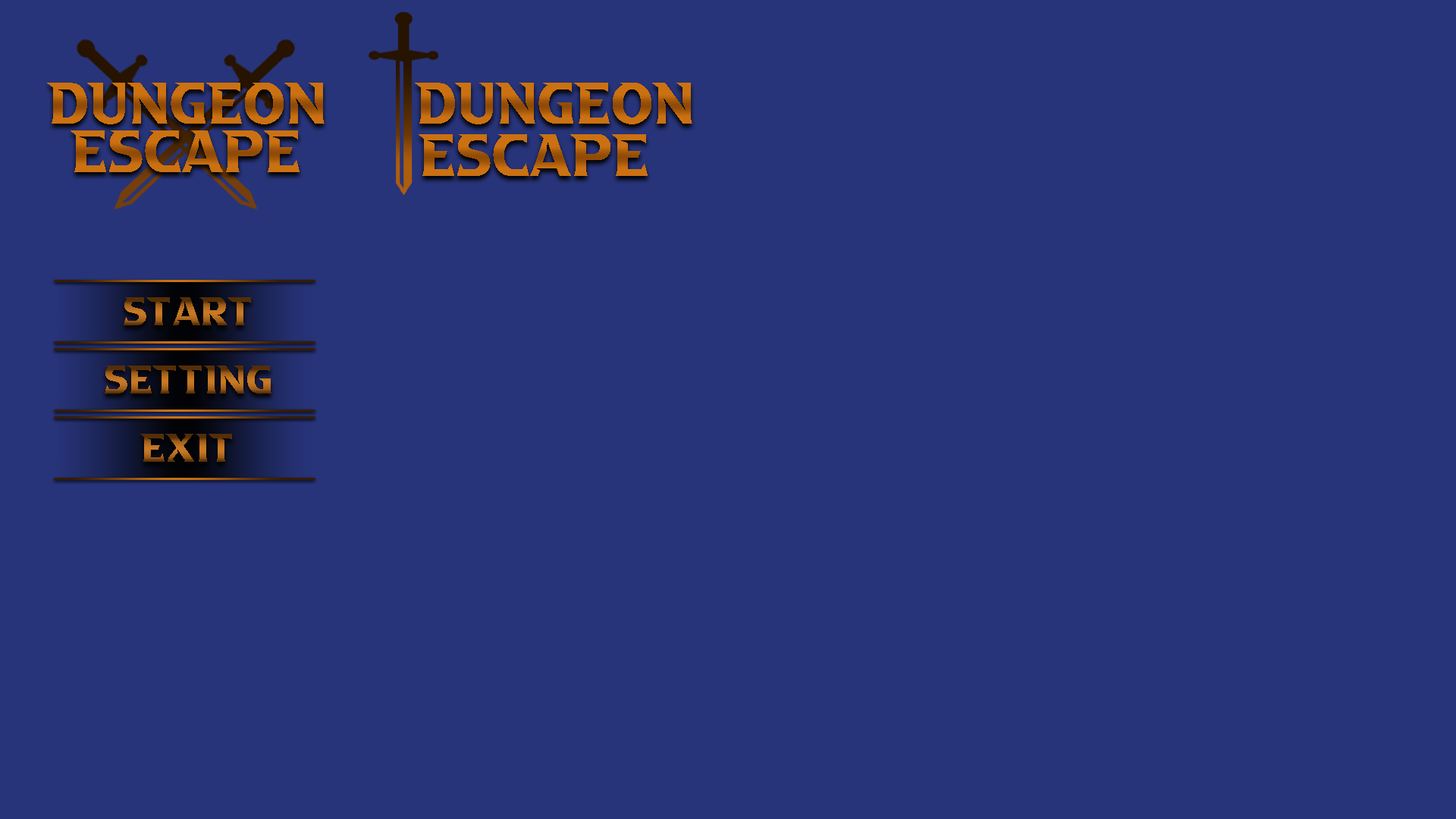
<style>
.page{position:relative;width:1456px;height:819px;background:#27347a}
.page>*{position:absolute;margin:0}
.t1{font:54.6px "aAbsoluteEmpire";letter-spacing:0.01em;color:#cc7110}
.t2{font:56.1px "aAbsoluteEmpire";letter-spacing:0.01em;color:#cb7111}
.t3{font:38px "aAbsoluteEmpire";letter-spacing:0.01em}
</style>
<div class="page">
<p class="t1" style="left:47px;top:83px;width:278px;height:41px">Dungeon</p>
<p class="t1" style="left:415px;top:83px;width:277px;height:41px">Dungeon</p>
<p class="t2" style="left:71px;top:130px;width:229px;height:42px">Escape</p>
<p class="t2" style="left:419px;top:134px;width:229px;height:42px">Escape</p>
<p class="t3" style="left:124px;top:297px;width:127px;height:28px">START</p>
<p class="t3" style="left:105px;top:366px;width:166px;height:28px">SETTING</p>
<p class="t3" style="left:140px;top:434px;width:92px;height:28px">EXIT</p>
</div>
